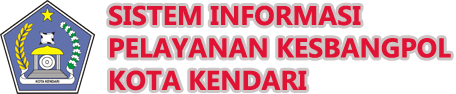
<style>
.page{position:relative;width:456px;height:94px;background:#ffffff}
.page>*{position:absolute;margin:0}
.t1{font:27px "Gadugi-Bold";color:#e11335}
</style>
<div class="page">
<p class="t1" style="left:109px;top:5px;width:342px;height:86px">SISTEM INFORMASI<br>PELAYANAN KESBANGPOL<br>KOTA KENDARI</p>
</div>
